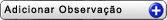
<style>
.page{position:relative;width:167px;height:20px}
.page>*{position:absolute;margin:0}
.t1{font:10px "ArialMT";letter-spacing:0.1em;color:#040404}
</style>
<div class="page">
<p class="t1" style="left:4px;top:5px;width:118px;height:11px">Adicionar Observação</p>
</div>
